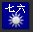
<style>
.page{position:relative;width:33px;height:32px;background:#000090}
.page>*{position:absolute;margin:0}
.t1{font:10.4px "SimSun";color:#ffffff}
</style>
<div class="page">
<p class="t1" style="left:5px;top:4px;width:20px;height:9px">七六</p>
</div>
